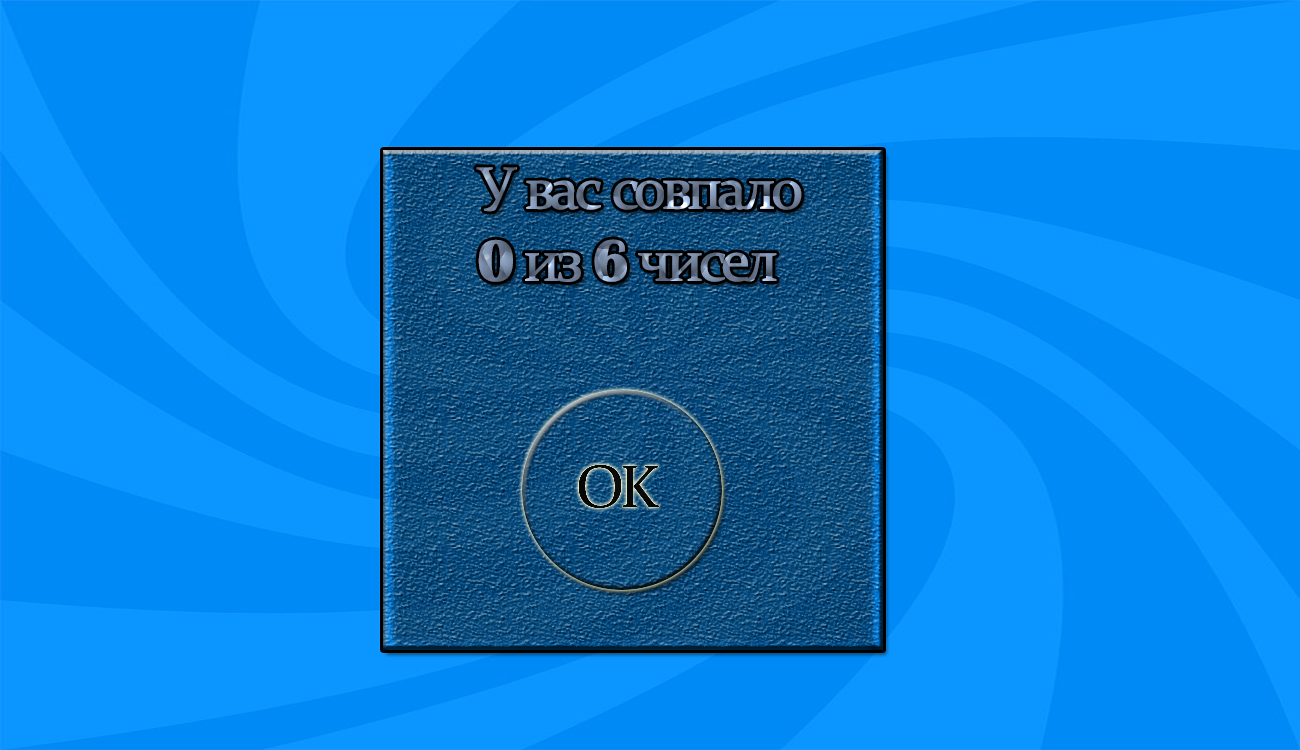
<style>
.page{position:relative;width:1300px;height:750px;background:#0b96ff}
.page>*{position:absolute;margin:0}
.t1{font:60px "Constantia";letter-spacing:-0.1em;font-weight:bold}
.t2{font:60px "BritannicBold";letter-spacing:-0.1em;font-weight:bold}
.t3{font:60px "Constantia";letter-spacing:-0.1em;color:#090808;font-weight:bold}
</style>
<div class="page">
<p class="t1" style="left:476px;top:167px;width:326px;height:115px">У вас совпало<span class="t2"><br>0 </span>из<span class="t2"> 6 </span>чисел</p>
<p class="t3" style="left:578px;top:464px;width:82px;height:45px">OK</p>
</div>
